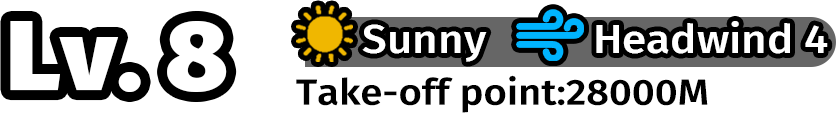
<style>
.page{position:relative;width:836px;height:116px;background:#ffffff}
.page>*{position:absolute;margin:0}
.t1{font:99px "FiraSans-Black";color:#ffffff;scale:1.07 1}
.t2{font:39.6px "FiraSans-Medium";color:#ffffff;scale:1.11 1}
.t3{font:36px "FiraSans-Medium";color:#000000;scale:1.11 1}
</style>
<div class="page">
<p class="t1" style="left:10px;top:21px;width:217px;height:71px">Lv. 8</p>
<p class="t2" style="left:362px;top:24px;width:125px;height:38px">Sunny</p>
<p class="t2" style="left:596px;top:21px;width:232px;height:33px">Headwind 4</p>
<p class="t3" style="left:296px;top:75px;width:412px;height:38px">Take-off point:28000M</p>
</div>
